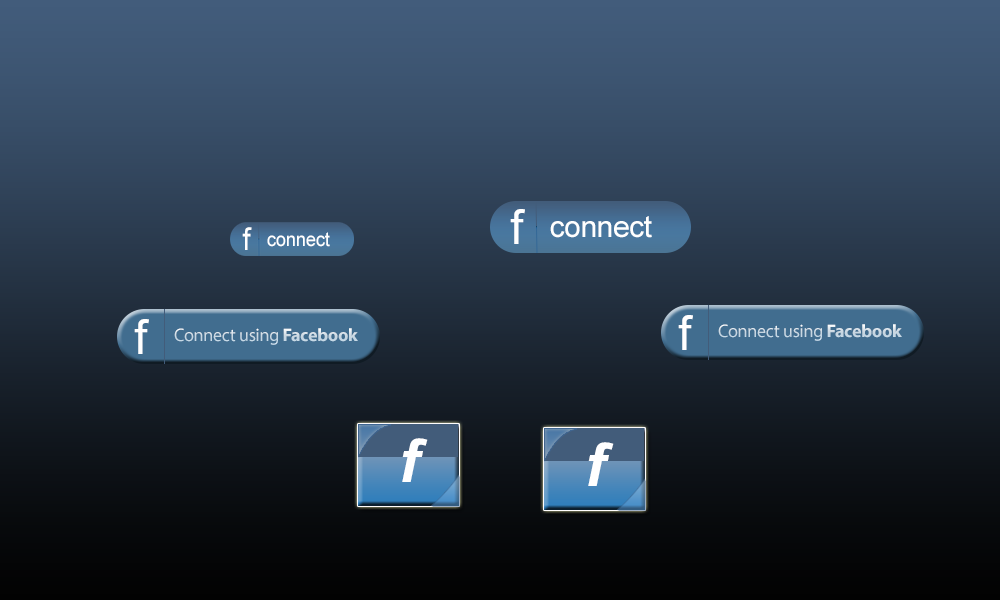
<style>
.page{position:relative;width:1000px;height:600px}
.page>*{position:absolute;margin:0}
.t1{font:48px "ArialMT";letter-spacing:-0.015em;color:#ffffff}
.t2{font:30px "ArialMT";letter-spacing:-0.015em;color:#ffffff}
.t3{font:31.4px "ArialMT";letter-spacing:-0.015em;color:#ffffff;scale:0.94 1}
.t4{font:19.6px "ArialMT";letter-spacing:-0.015em;color:#ffffff;scale:0.94 1}
.t5{font:18px "MyriadPro-Regular";letter-spacing:-0.015em;color:#c8d9e4}
.t6{font:18px "MyriadPro-Bold";letter-spacing:-0.015em;color:#c8d9e4}
</style>
<div class="page">
<p class="t1" style="left:510px;top:209px;width:15px;height:35px">f</p>
<p class="t2" style="left:550px;top:216px;width:102px;height:22px">connect</p>
<p class="t3" style="left:242px;top:227px;width:10px;height:23px">f</p>
<p class="t4" style="left:267px;top:232px;width:63px;height:15px">connect</p>
<p class="t1" style="left:678px;top:315px;width:15px;height:35px">f</p>
<p class="t1" style="left:134px;top:319px;width:15px;height:35px">f</p>
<p class="t5" style="left:174px;top:328px;width:184px;height:17px">Connect using <span class="t6">Facebook</span></p>
<p class="t5" style="left:718px;top:324px;width:184px;height:17px">Connect using <span class="t6">Facebook</span></p>
</div>
